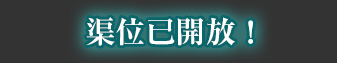
<style>
.page{position:relative;width:337px;height:63px;background:#333333}
.page>*{position:absolute;margin:0}
.t1{font:30px "RyuminPr6N-ExBold";color:#fffffe}
</style>
<div class="page">
<p class="t1" style="left:86px;top:17px;width:167px;height:29px">渠位已開放！</p>
</div>
